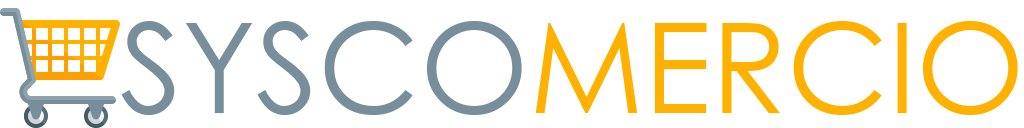
<style>
.page{position:relative;width:1024px;height:128px;background:#ffffff}
.page>*{position:absolute;margin:0}
.t1{font:125px "CenturyGothic";color:#ffb100}
.t2{font:125px "CenturyGothic";color:#788f9b}
</style>
<div class="page">
<p class="t1" style="left:121px;top:21px;width:897px;height:94px"><span class="t2">SYSCO</span>MERCIO</p>
</div>
